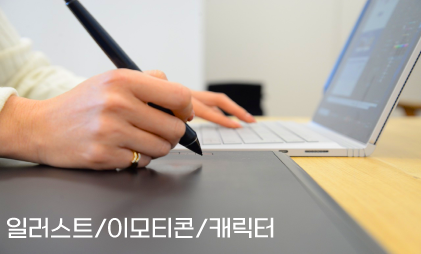
<style>
.page{position:relative;width:421px;height:254px}
.page>*{position:absolute;margin:0}
.t1{font:24px "SBAggroL";color:#ffffff}
</style>
<div class="page">
<p class="t1" style="left:6px;top:217px;width:268px;height:22px">일러스트/이모티콘/캐릭터</p>
</div>
